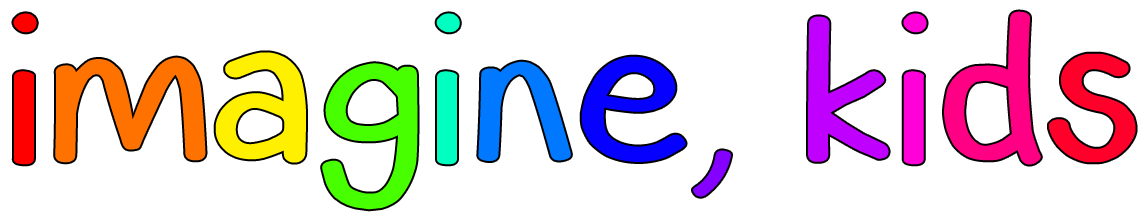
<style>
.page{position:relative;width:1141px;height:212px;background:#ffffff}
.page>*{position:absolute;margin:0}
.t1{font:239.9px "SmartKid";color:#ff0000}
.t2{font:239.9px "SmartKid";color:#ff7200}
.t3{font:239.9px "SmartKid";color:#fff000}
.t4{font:239.9px "SmartKid";color:#48ff00}
.t5{font:239.9px "SmartKid";color:#00ffc0}
.t6{font:239.9px "SmartKid";color:#0078ff}
.t7{font:239.9px "SmartKid";color:#0600ff}
.t8{font:239.9px "SmartKid";color:#8400ff}
.t9{font:239.9px "SmartKid";color:#c000ff}
.t10{font:239.9px "SmartKid";color:#ff00d8}
.t11{font:239.9px "SmartKid";color:#ff0084}
.t12{font:239.9px "SmartKid";color:#ff002a}
</style>
<div class="page">
<p class="t1" style="left:13px;top:11px;width:1123px;height:199px">i<span class="t2">m</span><span class="t3">a</span><span class="t4">g</span><span class="t5">i</span><span class="t6">n</span><span class="t7">e</span><span class="t8">, </span><span class="t9">k</span><span class="t10">i</span><span class="t11">d</span><span class="t12">s</span></p>
</div>
